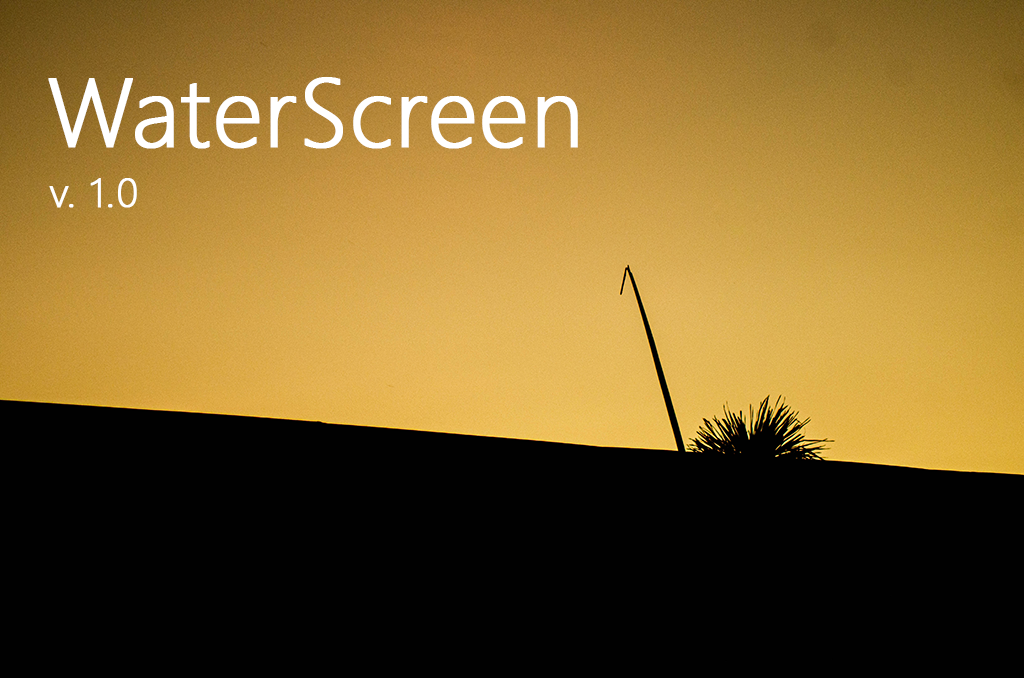
<style>
.page{position:relative;width:1024px;height:678px;background:#010101}
.page>*{position:absolute;margin:0}
.t1{font:96.9px "SegoeUI-Light";color:#ffffff;font-weight:bold}
.t2{font:42.4px "SegoeUI-Light";color:#ffffff;font-weight:bold}
</style>
<div class="page">
<p class="t1" style="left:48px;top:77px;width:530px;height:72px">WaterScreen</p>
<p class="t2" style="left:49px;top:178px;width:88px;height:30px">v. 1.0</p>
</div>
